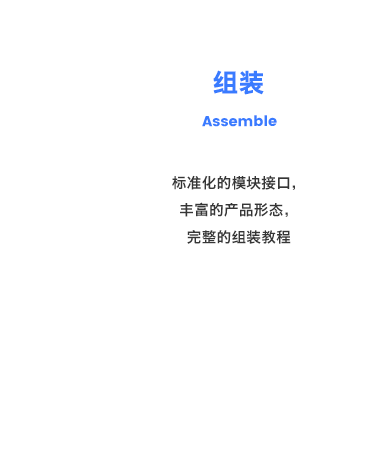
<style>
.page{position:relative;width:375px;height:450px;background:#ffffff}
.page>*{position:absolute;margin:0}
.t1{font:25.1px "HiraginoSansGB-W6";letter-spacing:0.02em;color:#397bff;font-weight:bold}
.t2{font:14.6px "Poppins";color:#397bff}
.t3{font:14.6px/27.1px "HiraginoSansGB-W6";letter-spacing:0.02em;color:#363636}
</style>
<div class="page">
<p class="t1" style="left:213px;top:70px;width:51px;height:25px">组装</p>
<p class="t2" style="left:202px;top:115px;width:75px;height:12px">Assemble</p>
<p class="t3" style="left:172px;top:175px;width:123px;height:69px;text-align:center">标准化的模块接口，<br>丰富的产品形态，<br>完整的组装教程</p>
</div>
